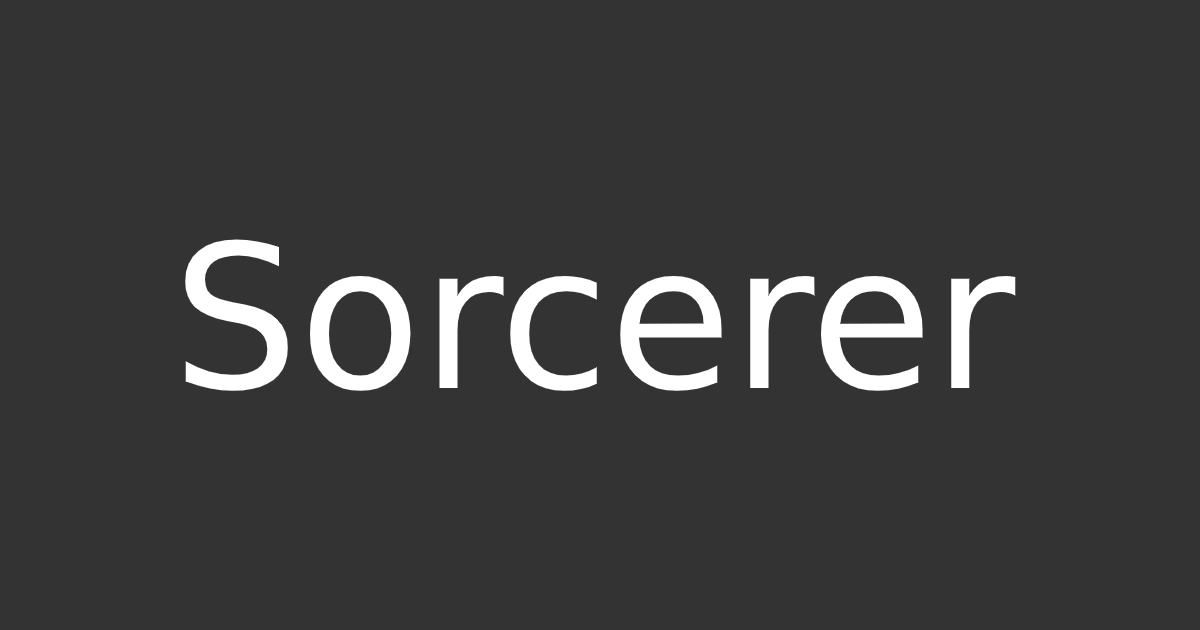
<style>
.page{position:relative;width:1200px;height:630px;background:#333333}
.page>*{position:absolute;margin:0}
.t1{font:200px "DejaVuSans";color:#ffffff}
</style>
<div class="page">
<p class="t1" style="left:185px;top:239px;width:831px;height:152px">Sorcerer</p>
</div>
